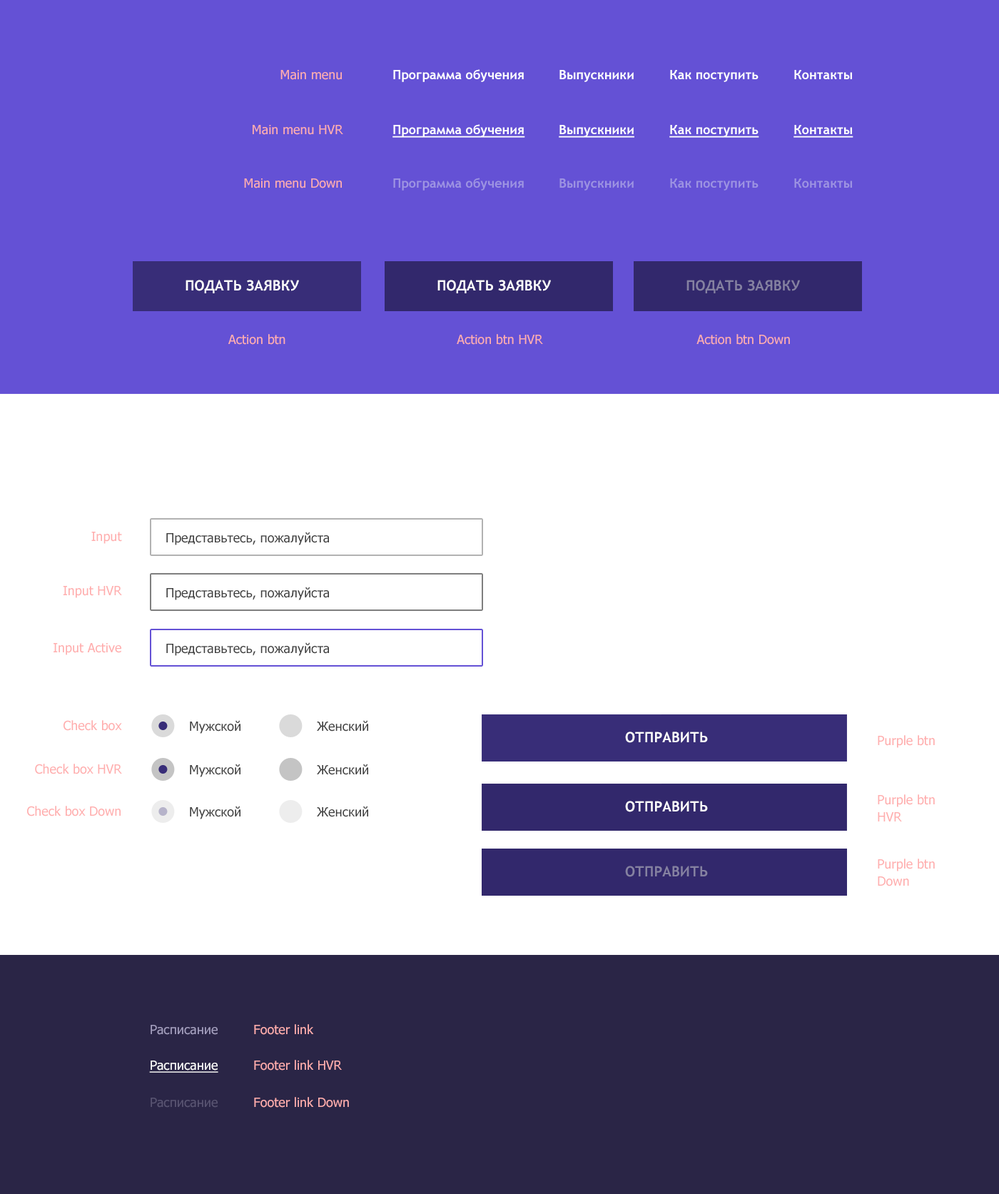
<style>
.page{position:relative;width:999px;height:1194px;background:#ffffff}
.page>*{position:absolute;margin:0}
.t1{font:12.8px "Tahoma";color:#ffaeae}
.t2{font:12.8px "TrebuchetMS-Bold";color:#ffffff}
.t3{font:12.8px "TrebuchetMS-Bold";color:#ffffff;text-decoration:underline}
.t4{font:12.8px "TrebuchetMS-Bold";color:#9d93e2}
.t5{font:14.3px "TrebuchetMS-Bold";color:#ffffff;text-transform:uppercase}
.t6{font:14.3px "TrebuchetMS-Bold";color:#8581a1;text-transform:uppercase}
.t7{font:12.8px "Tahoma";color:#404040}
.t8{font:12.8px/17.1px "Tahoma";color:#ffaeae}
.t9{font:12.8px "Tahoma";color:#a39ebe}
.t10{font:12.8px "Tahoma";color:#ffffff;text-decoration:underline}
.t11{font:12.8px "Tahoma";color:#595472}
</style>
<div class="page">
<p class="t1" style="left:280px;top:70px;width:62px;height:10px">Main menu</p>
<p class="t2" style="left:393px;top:69px;width:131px;height:13px">Программа обучения</p>
<p class="t2" style="left:559px;top:70px;width:75px;height:12px">Выпускники</p>
<p class="t2" style="left:670px;top:70px;width:88px;height:12px">Как поступить</p>
<p class="t2" style="left:794px;top:70px;width:58px;height:10px">Контакты</p>
<p class="t1" style="left:253px;top:125px;width:90px;height:10px">Main menu HVR</p>
<p class="t3" style="left:392px;top:124px;width:133px;height:14px">Программа обучения</p>
<p class="t3" style="left:559px;top:125px;width:75px;height:13px">Выпускники</p>
<p class="t3" style="left:669px;top:125px;width:90px;height:13px">Как поступить</p>
<p class="t3" style="left:793px;top:125px;width:60px;height:13px">Контакты</p>
<p class="t1" style="left:244px;top:178px;width:98px;height:10px">Main menu Down</p>
<p class="t4" style="left:393px;top:178px;width:131px;height:13px">Программа обучения</p>
<p class="t4" style="left:559px;top:178px;width:75px;height:13px">Выпускники</p>
<p class="t4" style="left:670px;top:178px;width:88px;height:13px">Как поступить</p>
<p class="t4" style="left:794px;top:178px;width:58px;height:10px">Контакты</p>
<p class="t5" style="left:186px;top:280px;width:113px;height:13px">Подать заявку</p>
<p class="t5" style="left:437px;top:280px;width:114px;height:13px">Подать заявку</p>
<p class="t6" style="left:686px;top:280px;width:114px;height:13px">Подать заявку</p>
<p class="t1" style="left:228px;top:334px;width:57px;height:11px">Action btn</p>
<p class="t1" style="left:457px;top:334px;width:86px;height:11px">Action btn HVR</p>
<p class="t1" style="left:696px;top:334px;width:94px;height:11px">Action btn Down</p>
<p class="t1" style="left:91px;top:532px;width:31px;height:12px">Input</p>
<p class="t7" style="left:166px;top:532px;width:163px;height:13px">Представьтесь, пожалуйста</p>
<p class="t1" style="left:63px;top:586px;width:59px;height:12px">Input HVR</p>
<p class="t7" style="left:166px;top:587px;width:163px;height:13px">Представьтесь, пожалуйста</p>
<p class="t1" style="left:54px;top:643px;width:67px;height:12px">Input Active</p>
<p class="t7" style="left:166px;top:642px;width:163px;height:14px">Представьтесь, пожалуйста</p>
<p class="t1" style="left:64px;top:720px;width:58px;height:11px">Check box</p>
<p class="t7" style="left:190px;top:720px;width:50px;height:13px">Мужской</p>
<p class="t7" style="left:317px;top:720px;width:51px;height:11px">Женский</p>
<p class="t5" style="left:625px;top:731px;width:83px;height:12px">Отправить</p>
<p class="t1" style="left:878px;top:735px;width:57px;height:13px">Purple btn</p>
<p class="t1" style="left:35px;top:763px;width:87px;height:11px">Check box HVR</p>
<p class="t7" style="left:190px;top:763px;width:50px;height:14px">Мужской</p>
<p class="t7" style="left:317px;top:763px;width:51px;height:12px">Женский</p>
<p class="t8" style="left:878px;top:794px;width:57px;height:27px">Purple btn<br>HVR</p>
<p class="t1" style="left:27px;top:806px;width:94px;height:10px">Check box Down</p>
<p class="t7" style="left:190px;top:806px;width:50px;height:13px">Мужской</p>
<p class="t7" style="left:317px;top:806px;width:51px;height:11px">Женский</p>
<p class="t5" style="left:625px;top:801px;width:83px;height:11px">Отправить</p>
<p class="t6" style="left:625px;top:865px;width:83px;height:12px">Отправить</p>
<p class="t8" style="left:878px;top:858px;width:57px;height:28px">Purple btn<br>Down</p>
<p class="t9" style="left:151px;top:1025px;width:67px;height:10px">Расписание</p>
<p class="t1" style="left:254px;top:1024px;width:60px;height:11px">Footer link</p>
<p class="t10" style="left:149px;top:1060px;width:69px;height:12px">Расписание</p>
<p class="t1" style="left:254px;top:1060px;width:88px;height:10px">Footer link HVR</p>
<p class="t11" style="left:151px;top:1097px;width:67px;height:10px">Расписание</p>
<p class="t1" style="left:254px;top:1097px;width:95px;height:10px">Footer link Down</p>
</div>
